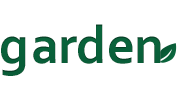
<style>
.page{position:relative;width:177px;height:103px;background:#ffffff}
.page>*{position:absolute;margin:0}
.t1{font:54.4px "Corbel-Bold";color:#0a663d}
</style>
<div class="page">
<p class="t1" style="left:1px;top:24px;width:160px;height:52px">garden</p>
</div>
